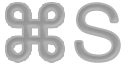
<style>
.page{position:relative;width:128px;height:64px;background:#ffffff}
.page>*{position:absolute;margin:0}
.t1{font:76.2px "HelveticaNeue-Light";letter-spacing:0.05em;color:#9a9a9a}
</style>
<div class="page">
<p class="t1" style="left:76px;top:4px;width:43px;height:57px">S</p>
</div>
